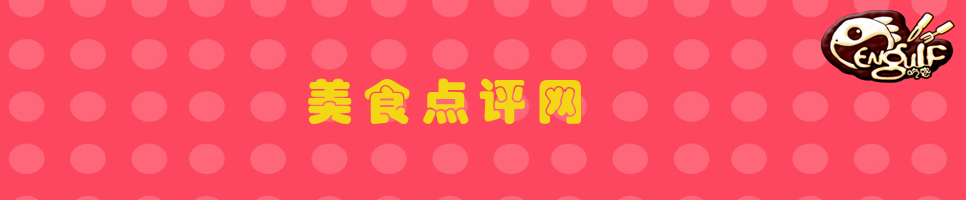
<style>
.page{position:relative;width:966px;height:200px;background:#fd475e}
.page>*{position:absolute;margin:0}
.t1{font:48px "STHupo";letter-spacing:0.2em;color:#f4d714}
</style>
<div class="page">
<p class="t1" style="left:308px;top:78px;width:273px;height:46px">美食点评网</p>
</div>
